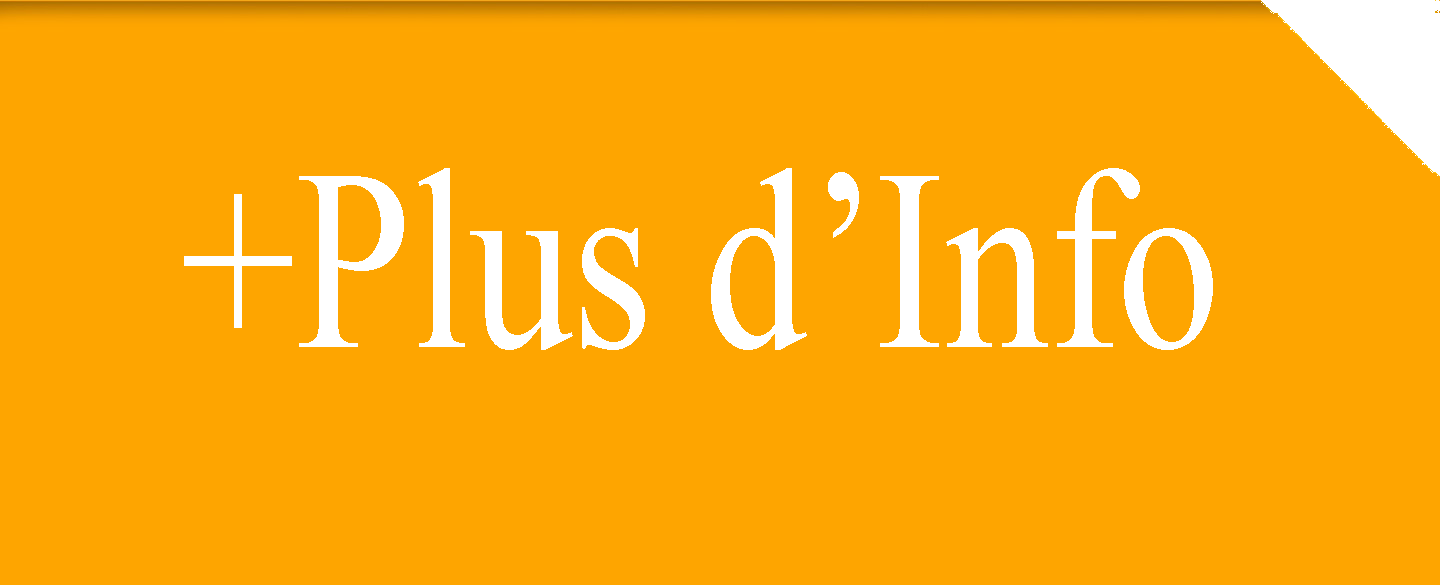
<style>
.page{position:relative;width:1440px;height:585px;background:#fea500}
.page>*{position:absolute;margin:0}
.t1{font:258.3px "TimesNewRomanPSMT";color:#ffffff;scale:0.8 1}
</style>
<div class="page">
<p class="t1" style="left:184px;top:168px;width:1029px;height:182px">+Plus d’Info</p>
</div>
